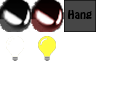
<style>
.page{position:relative;width:128px;height:96px;background:#ffffff}
.page>*{position:absolute;margin:0}
.t1{font:10.5px "HoboStd";color:#000000}
</style>
<div class="page">
<p class="t1" style="left:68px;top:10px;width:24px;height:9px">Hang</p>
</div>
